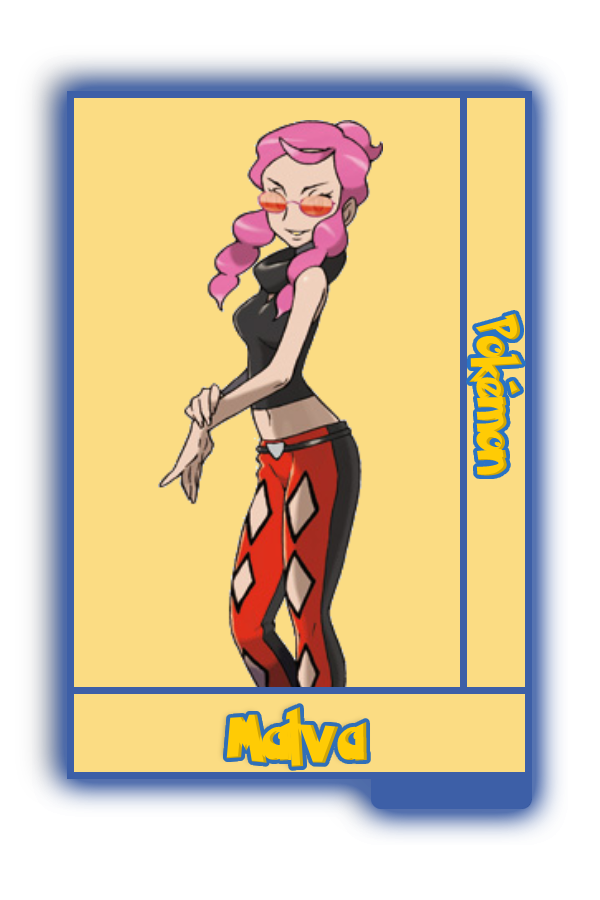
<style>
.page{position:relative;width:600px;height:900px;background:#fbdc83}
.page>*{position:absolute;margin:0}
.t1{font:48.8px "PokemonSolidNormal";color:#ffcb05;scale:0.8 1}
.t2{font:56.6px "PokemonSolidNormal";color:#ffcb05;scale:0.92 1}
</style>
<div class="page">
<p class="t1" style="left:469px;top:313px;width:54px;height:163px;rotate:90deg">Pokémon</p>
<p class="t2" style="left:226px;top:706px;width:141px;height:61px">Malva</p>
</div>
